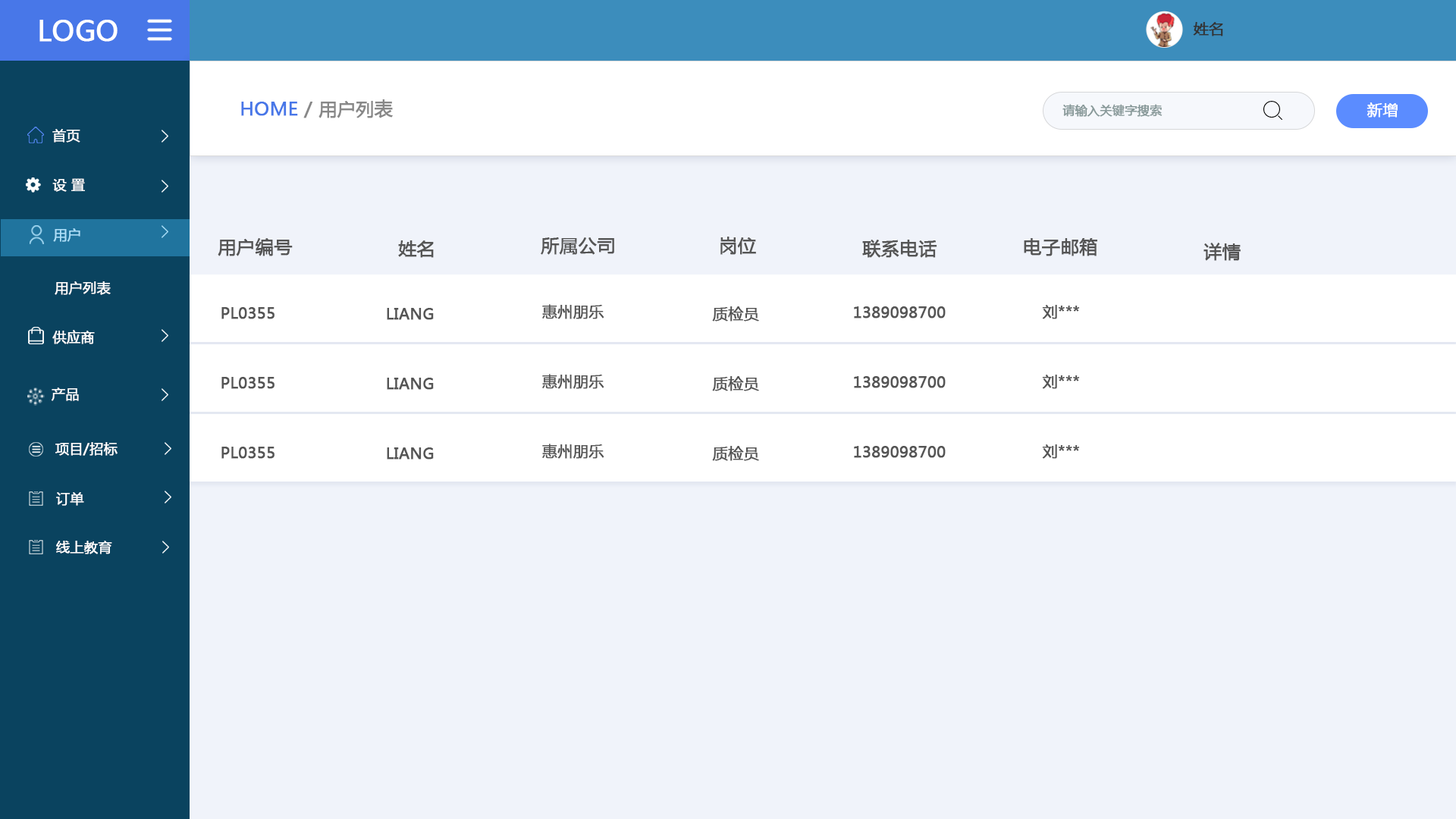
<style>
.page{position:relative;width:1456px;height:819px;background:#f0f3fa}
.page>*{position:absolute;margin:0}
.t1{font:27.3px "MicrosoftYaHei";color:#ffffff;text-transform:uppercase;font-weight:bold}
.t2{font:15.2px "MicrosoftYaHei";color:#333333;text-transform:uppercase;font-weight:bold}
.t3{font:18.2px "MicrosoftYaHei";color:#888888;text-transform:uppercase;font-weight:bold}
.t4{font:18.2px "MicrosoftYaHei";color:#4877e8;text-transform:uppercase;font-weight:bold}
.t5{font:12.1px "MicrosoftYaHei";color:#889999;text-transform:uppercase;font-weight:bold}
.t6{font:15.2px "MicrosoftYaHei";color:#ffffff;text-transform:uppercase;font-weight:bold}
.t7{font:13.6px "MicrosoftYaHei";color:#ffffff;text-transform:uppercase;font-weight:bold}
.t8{font:13.6px "MicrosoftYaHei";color:#acdff9;text-transform:uppercase;font-weight:bold}
.t9{font:18.2px "MicrosoftYaHei";color:#555555;text-transform:uppercase;font-weight:bold}
.t10{font:15.2px "MicrosoftYaHei";color:#555555;text-transform:uppercase;font-weight:bold}
</style>
<div class="page">
<p class="t1" style="left:39px;top:20px;width:79px;height:22px">logo</p>
<p class="t2" style="left:1193px;top:22px;width:30px;height:14px">姓名</p>
<p class="t3" style="left:241px;top:99px;width:152px;height:19px"><span class="t4">HOME </span>/ 用户列表</p>
<p class="t5" style="left:1062px;top:104px;width:101px;height:13px">请输入关键字搜索</p>
<p class="t6" style="left:1366px;top:102px;width:32px;height:16px">新增</p>
<p class="t7" style="left:52px;top:129px;width:28px;height:14px">首页</p>
<p class="t7" style="left:52px;top:178px;width:33px;height:14px">设 置</p>
<p class="t8" style="left:53px;top:228px;width:27px;height:14px">用户</p>
<p class="t9" style="left:218px;top:238px;width:75px;height:18px">用户编号</p>
<p class="t9" style="left:398px;top:240px;width:36px;height:18px">姓名</p>
<p class="t9" style="left:541px;top:237px;width:73px;height:18px">所属公司</p>
<p class="t9" style="left:720px;top:237px;width:36px;height:18px">岗位</p>
<p class="t9" style="left:862px;top:240px;width:75px;height:18px">联系电话</p>
<p class="t9" style="left:1024px;top:238px;width:73px;height:18px">电子邮箱</p>
<p class="t9" style="left:1203px;top:243px;width:38px;height:18px">详情</p>
<p class="t7" style="left:55px;top:281px;width:56px;height:14px">用户列表</p>
<p class="t10" style="left:542px;top:304px;width:62px;height:15px">惠州朋乐</p>
<p class="t10" style="left:1042px;top:305px;width:38px;height:14px">刘***</p>
<p class="t10" style="left:221px;top:307px;width:54px;height:12px">PL0355</p>
<p class="t10" style="left:387px;top:308px;width:47px;height:12px">liang</p>
<p class="t10" style="left:712px;top:306px;width:47px;height:16px">质检员</p>
<p class="t10" style="left:854px;top:306px;width:92px;height:12px">1389098700</p>
<p class="t7" style="left:52px;top:330px;width:43px;height:14px">供应商</p>
<p class="t10" style="left:221px;top:377px;width:54px;height:12px">PL0355</p>
<p class="t10" style="left:387px;top:378px;width:47px;height:12px">liang</p>
<p class="t10" style="left:542px;top:374px;width:62px;height:15px">惠州朋乐</p>
<p class="t10" style="left:712px;top:376px;width:47px;height:15px">质检员</p>
<p class="t10" style="left:854px;top:376px;width:92px;height:12px">1389098700</p>
<p class="t10" style="left:1042px;top:375px;width:38px;height:14px">刘***</p>
<p class="t7" style="left:52px;top:388px;width:27px;height:13px">产品</p>
<p class="t7" style="left:55px;top:442px;width:63px;height:14px">项目/招标</p>
<p class="t10" style="left:221px;top:447px;width:54px;height:12px">PL0355</p>
<p class="t10" style="left:387px;top:447px;width:47px;height:13px">liang</p>
<p class="t10" style="left:542px;top:444px;width:62px;height:15px">惠州朋乐</p>
<p class="t10" style="left:712px;top:446px;width:47px;height:15px">质检员</p>
<p class="t10" style="left:854px;top:446px;width:92px;height:12px">1389098700</p>
<p class="t10" style="left:1042px;top:444px;width:38px;height:15px">刘***</p>
<p class="t7" style="left:56px;top:492px;width:28px;height:14px">订单</p>
<p class="t7" style="left:56px;top:541px;width:56px;height:13px">线上教育</p>
</div>
